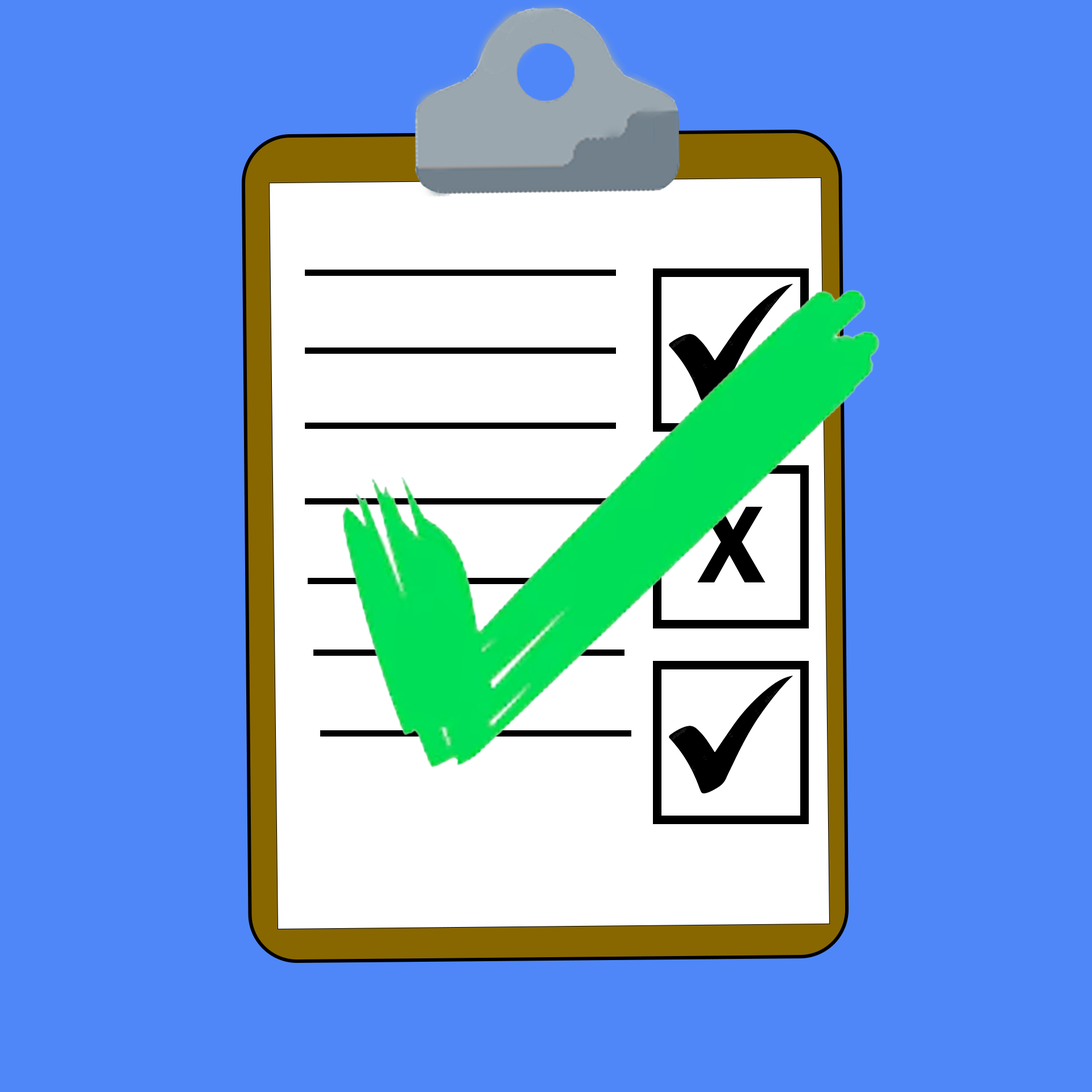
<style>
.page{position:relative;width:1092px;height:1092px;background:#4f87f8}
.page>*{position:absolute;margin:0}
.t1{font:113.7px "FranklinGothic-Demi";color:#000000}
</style>
<div class="page">
<p class="t1" style="left:697px;top:507px;width:69px;height:75px">X</p>
</div>
